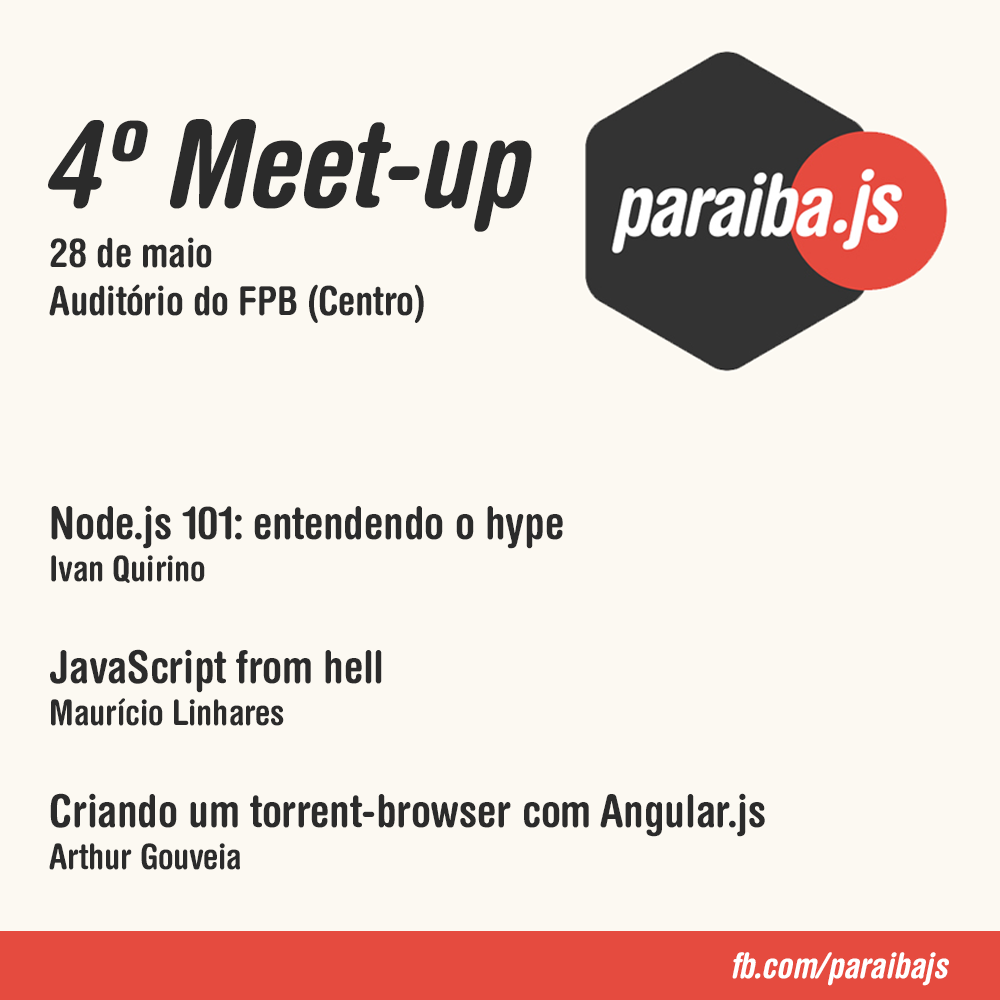
<style>
.page{position:relative;width:1000px;height:1000px;background:#fcf9f2}
.page>*{position:absolute;margin:0}
.t1{font:120px "HelveticaRoundedLT-BoldCondObl";letter-spacing:-0.005em;color:#2b2b2b}
.t2{font:40px "HelveticaRoundedLT-BoldCond";letter-spacing:-0.005em;color:#2b2b2b}
.t3{font:45px "HelveticaRoundedLT-BoldCond";letter-spacing:-0.005em;color:#2b2b2b}
.t4{font:35px "HelveticaRoundedLT-BoldCond";letter-spacing:-0.005em;color:#2b2b2b}
.t5{font:35px "HelveticaRoundedLT-BoldCondObl";letter-spacing:-0.005em;color:#ffffff}
</style>
<div class="page">
<p class="t1" style="left:48px;top:119px;width:484px;height:113px">4º Meet-up</p>
<p class="t2" style="left:49px;top:237px;width:375px;height:86px">28 de maio<br>Auditório do FPB (Centro)</p>
<p class="t3" style="left:49px;top:505px;width:716px;height:365px">Node.js 101: entendendo o hype<br><span class="t4">Ivan Quirino<br><br></span>JavaScript from hell<br><span class="t4">Maurício Linhares<br><br></span>Criando um torrent-browser com Angular.js<br><span class="t4">Arthur Gouveia</span></p>
<p class="t5" style="left:732px;top:952px;width:217px;height:34px">fb.com/paraibajs</p>
</div>
